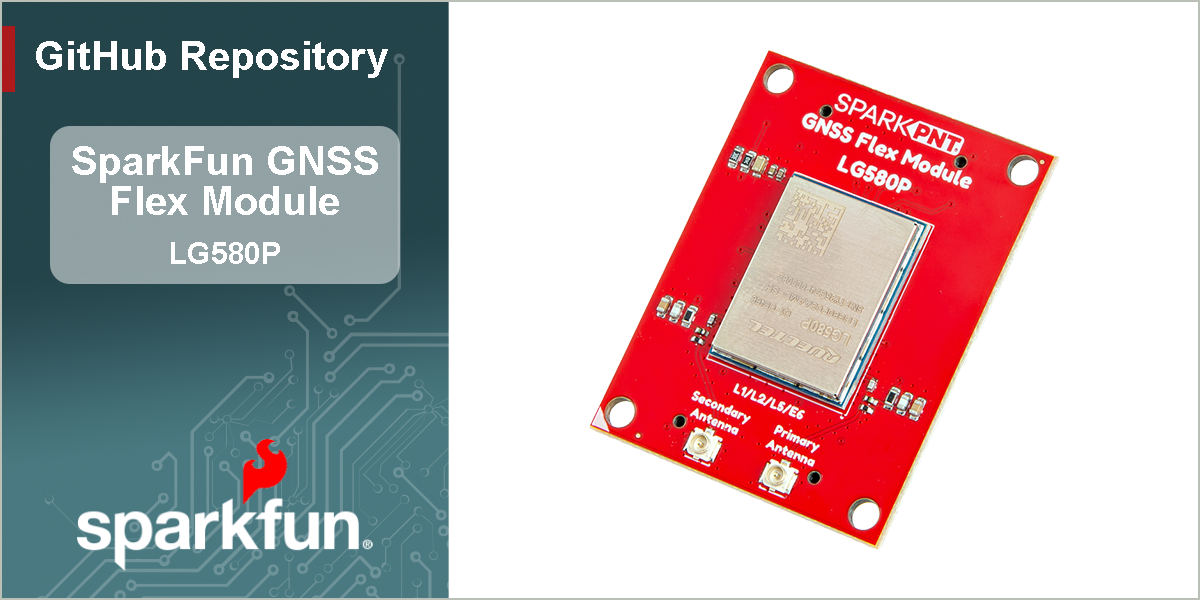
<style>
.page{position:relative;width:1200px;height:600px;background:#ffffff}
.page>*{position:absolute;margin:0}
.t1{font:40px "Arial-BoldMT";color:#ffffff}
.t2{font:30px "Arial-BoldMT";color:#ffffff}
</style>
<div class="page">
<p class="t1" style="left:36px;top:41px;width:352px;height:37px">GitHub Repository</p>
<p class="t1" style="left:72px;top:146px;width:306px;height:69px;text-align:center">SparkFun GNSS<br>Flex Module</p>
<p class="t2" style="left:171px;top:242px;width:109px;height:22px">LG580P</p>
</div>
